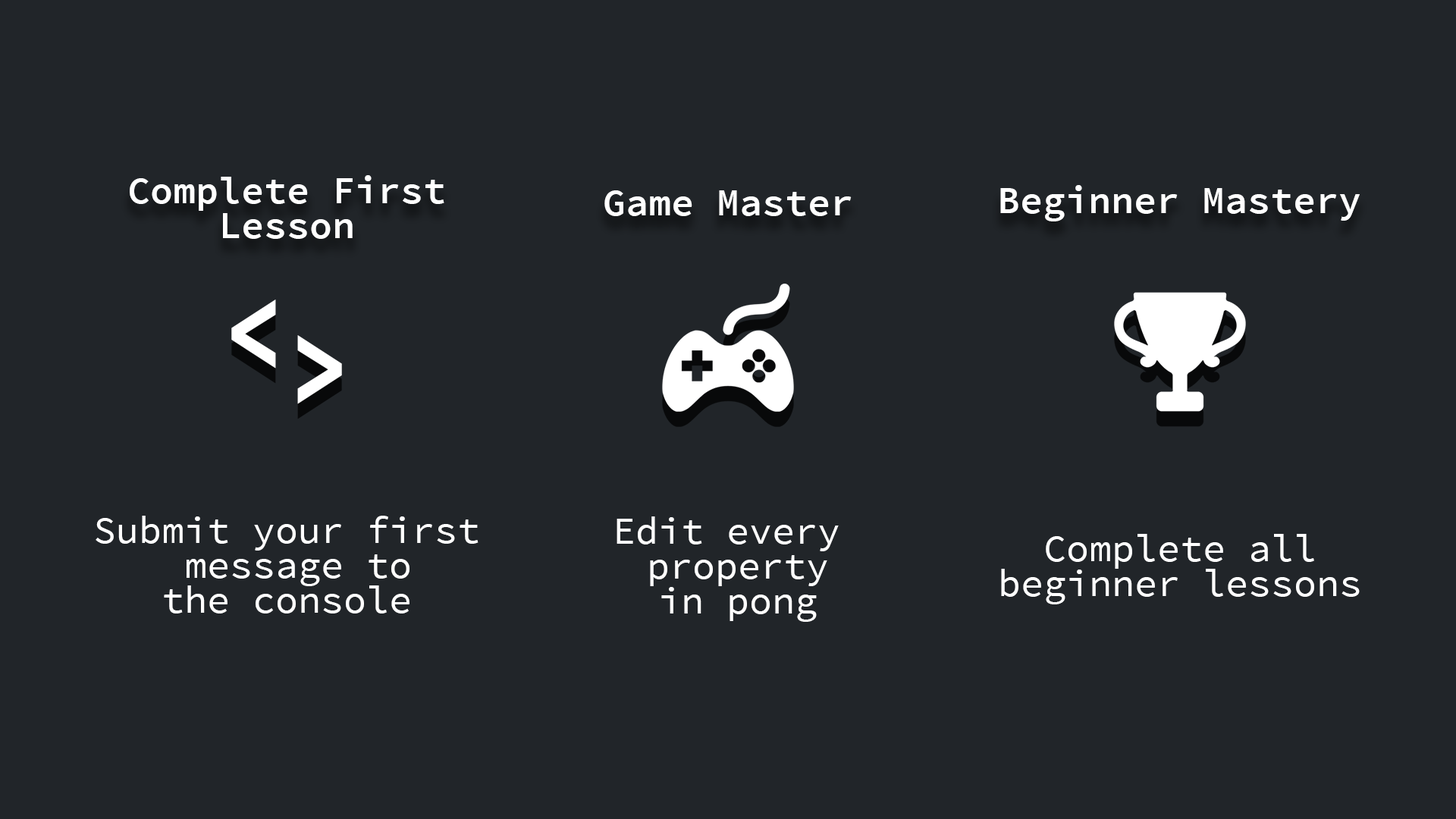
<style>
.page{position:relative;width:1456px;height:819px;background:#212529}
.page>*{position:absolute;margin:0}
.t1{font:37.9px/34.8px "SourceCodePro-Semibold";color:#ffffff}
.t2{font:37.9px "SourceCodePro-Semibold";color:#ffffff}
.t3{font:113.7px "SourceCodePro-Bold";color:#ffffff}
.t4{font:37.9px/34.8px "SourceCodePro-Regular";color:#ffffff}
</style>
<div class="page">
<p class="t1" style="left:130px;top:175px;width:314px;height:64px;text-align:center">Complete First<br>Lesson</p>
<p class="t2" style="left:1000px;top:185px;width:360px;height:36px">Beginner Mastery</p>
<p class="t2" style="left:604px;top:190px;width:248px;height:26px">Game Master</p>
<p class="t3" style="left:231px;top:300px;width:45px;height:69px">&lt;</p>
<p class="t3" style="left:297px;top:335px;width:45px;height:69px">&gt;</p>
<p class="t4" style="left:96px;top:516px;width:383px;height:97px;text-align:center">Submit your first<br> message to<br>the console</p>
<p class="t4" style="left:617px;top:516px;width:222px;height:106px;text-align:center">Edit every <br>property<br>in pong</p>
<p class="t4" style="left:1001px;top:534px;width:359px;height:70px;text-align:center">Complete all<br>beginner lessons</p>
</div>
